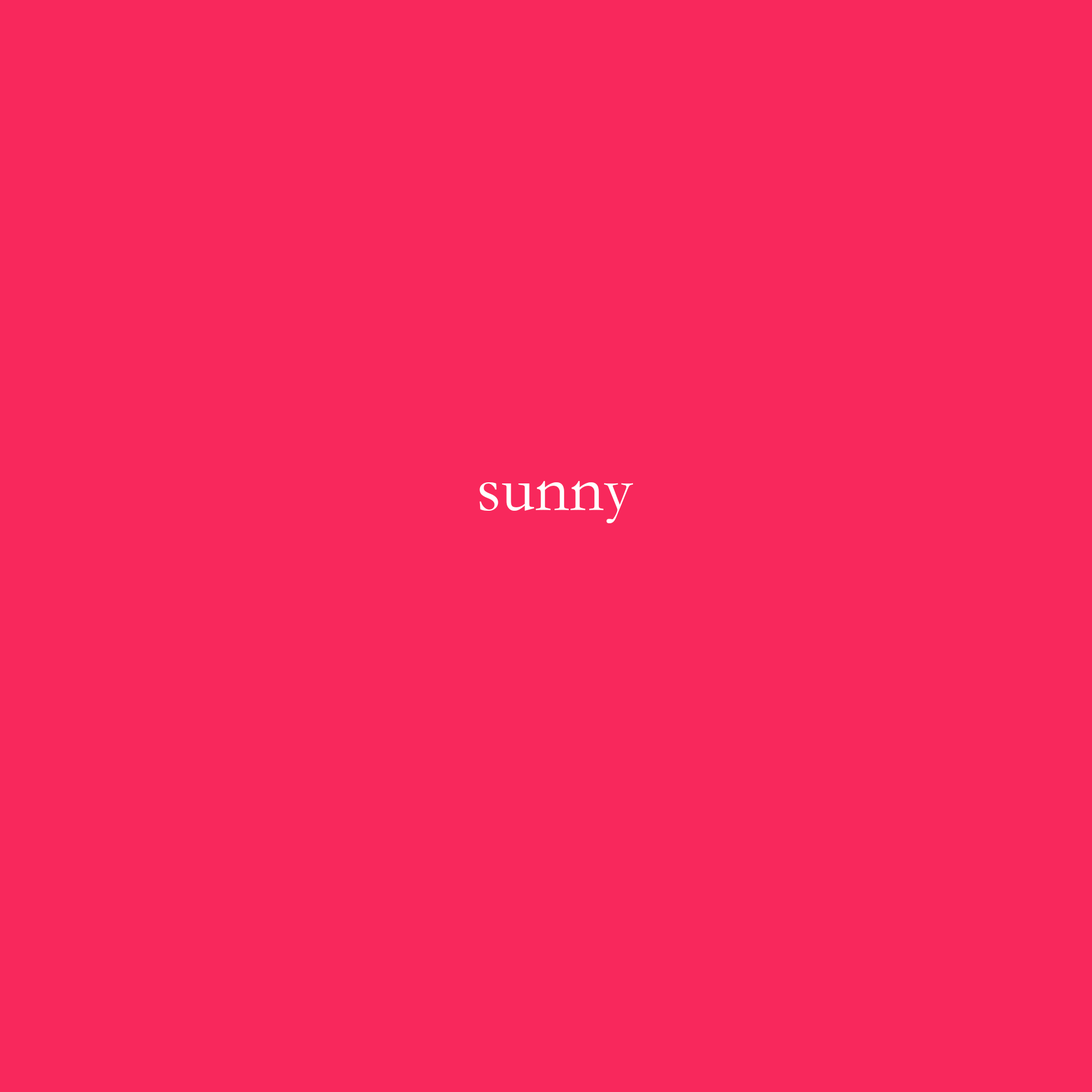
<style>
.page{position:relative;width:1092px;height:1092px;background:#f8285c}
.page>*{position:absolute;margin:0}
.t1{font:68.2px "STFangsong";color:#ffffff}
</style>
<div class="page">
<p class="t1" style="left:479px;top:481px;width:154px;height:42px">sunny</p>
</div>
